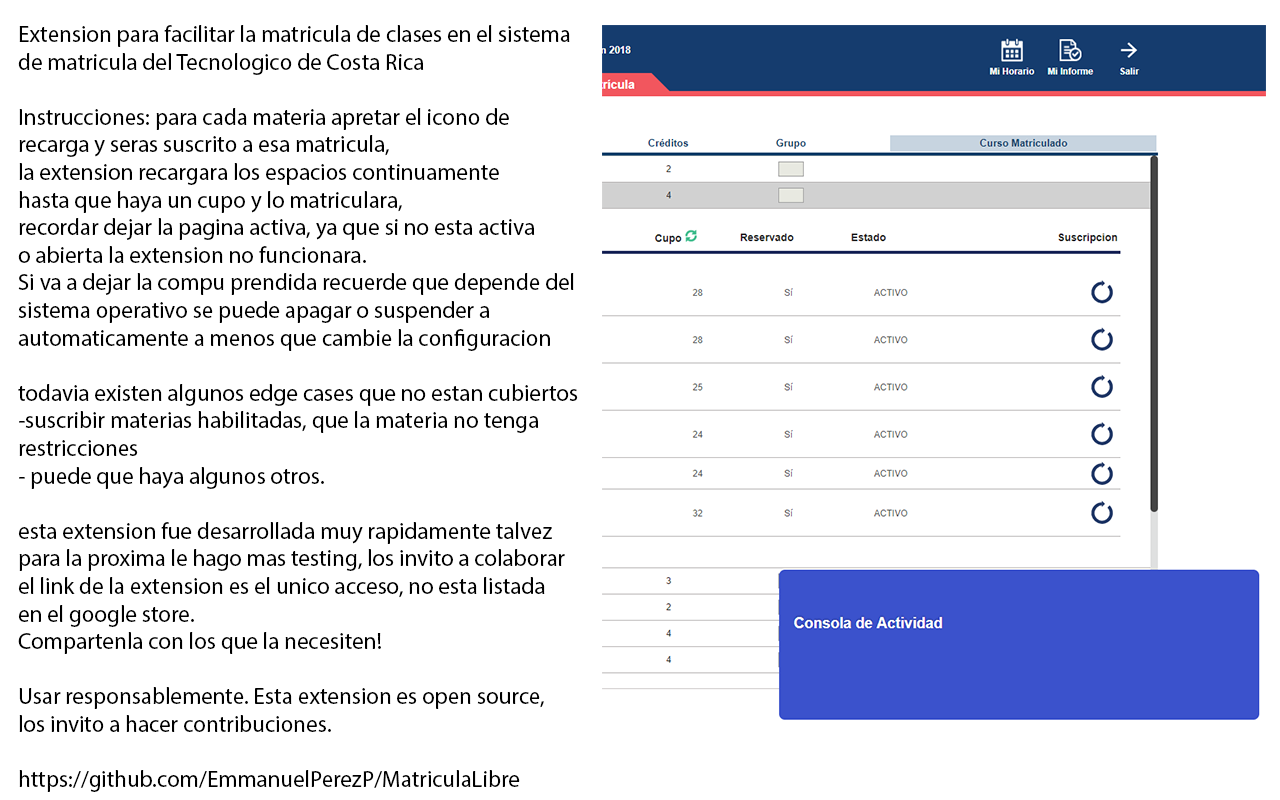
<style>
.page{position:relative;width:1280px;height:800px;background:#ffffff}
.page>*{position:absolute;margin:0}
.t1{font:23px "MyriadPro-Regular";color:#000000}
</style>
<div class="page">
<p class="t1" style="left:18px;top:25px;width:560px;height:767px">Extension para facilitar la matricula de clases en el sistema <br>de matricula del Tecnologico de Costa Rica<br><br>Instrucciones: para cada materia apretar el icono de <br>recarga y seras suscrito a esa matricula, <br>la extension recargara los espacios continuamente <br>hasta que haya un cupo y lo matriculara, <br>recordar dejar la pagina activa, ya que si no esta activa <br>o abierta la extension no funcionara.<br>Si va a dejar la compu prendida recuerde que depende del<br>sistema operativo se puede apagar o suspender a<br>automaticamente a menos que cambie la configuracion<br><br>todavia existen algunos edge cases que no estan cubiertos<br>-suscribir materias habilitadas, que la materia no tenga<br>restricciones<br>- puede que haya algunos otros.<br><br>esta extension fue desarrollada muy rapidamente talvez <br>para la proxima le hago mas testing, los invito a colaborar<br>el link de la extension es el unico acceso, no esta listada<br>en el google store.<br>Compartenla con los que la necesiten!<br><br>Usar responsablemente. Esta extension es open source, <br>los invito a hacer contribuciones. <br><br>https://github.com/EmmanuelPerezP/MatriculaLibre</p>
</div>
